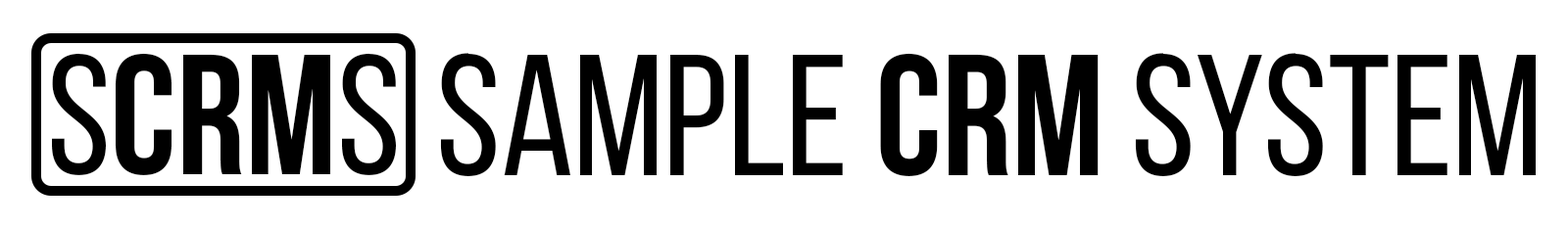
<style>
.page{position:relative;width:1568px;height:229px;background:#ffffff}
.page>*{position:absolute;margin:0}
.t1{font:170.6px "BebasNeueBold";color:#000000}
.t2{font:170.6px "BebasNeueRegular";color:#000000}
.t3{font:172.8px "BebasNeueRegular";color:#000000}
.t4{font:172.8px "BebasNeueBold";color:#000000}
</style>
<div class="page">
<p class="t1" style="left:52px;top:53px;width:344px;height:122px"><span class="t2">S</span>CRM<span class="t2">S</span></p>
<p class="t3" style="left:440px;top:53px;width:1096px;height:123px">Sample<span class="t4"> CRM </span>sYSTEM</p>
</div>
